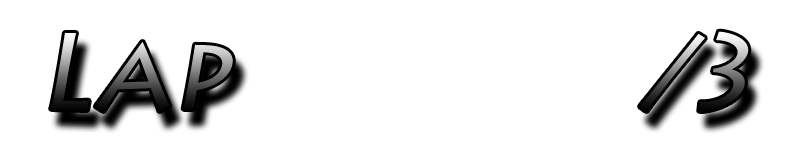
<style>
.page{position:relative;width:800px;height:161px;background:#ffffff}
.page>*{position:absolute;margin:0}
.t1{font:107.3px "LithosPro-Regular";font-style:italic}
</style>
<div class="page">
<p class="t1" style="left:51px;top:31px;width:698px;height:80px">Lap             /3</p>
</div>
